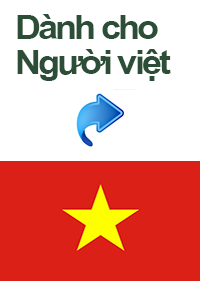
<style>
.page{position:relative;width:200px;height:281px;background:#ffffff}
.page>*{position:absolute;margin:0}
.t1{font:34.2px/48px "SVN-ArialBold";letter-spacing:-0.08em;color:#2c4e37;scale:1.05 1}
</style>
<div class="page">
<p class="t1" style="left:17px;top:14px;width:154px;height:67px">Dành cho<br>Người việt</p>
</div>
